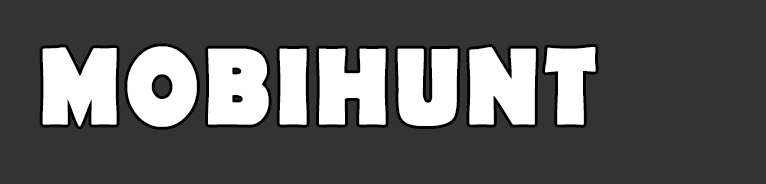
<style>
.page{position:relative;width:766px;height:184px;background:#333333}
.page>*{position:absolute;margin:0}
.t1{font:110.5px "BerlinSansFB-Bold";letter-spacing:0.05em;color:#ffffff;scale:0.87 1}
</style>
<div class="page">
<p class="t1" style="left:42px;top:46px;width:554px;height:81px">MOBIHUNT</p>
</div>
